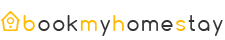
<style>
.page{position:relative;width:225px;height:40px;background:#ffffff}
.page>*{position:absolute;margin:0}
.t1{font:20px "Comfortaa";letter-spacing:0.11em;color:#333333}
.t2{font:20px "Comfortaa";letter-spacing:0.11em;color:#ffbb00}
</style>
<div class="page">
<p class="t1" style="left:23px;top:15px;width:200px;height:21px"><span class="t2">b</span>ook<span class="t2">m</span>y<span class="t2">h</span>ome<span class="t2">s</span>tay</p>
</div>
